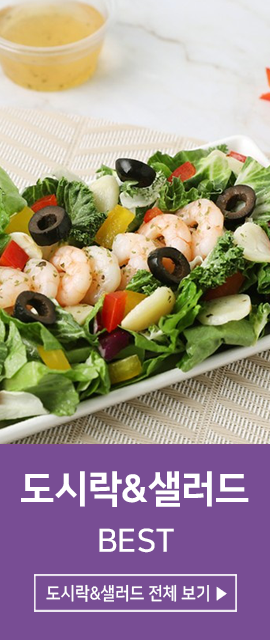
<style>
.page{position:relative;width:270px;height:640px;background:#784d94}
.page>*{position:absolute;margin:0}
.t1{font:38px "NanumSquareEB";color:#ffffff}
.t2{font:32px "NanumSquareB";color:#ffffff}
.t3{font:17.8px "NanumSquareB";color:#ffffff;scale:0.9 1}
</style>
<div class="page">
<p class="t1" style="left:21px;top:471px;width:228px;height:36px">도시락&amp;샐러드</p>
<p class="t2" style="left:99px;top:528px;width:75px;height:25px">BEST</p>
<p class="t3" style="left:46px;top:584px;width:181px;height:18px">도시락&amp;샐러드 전체 보기 ▶</p>
</div>
